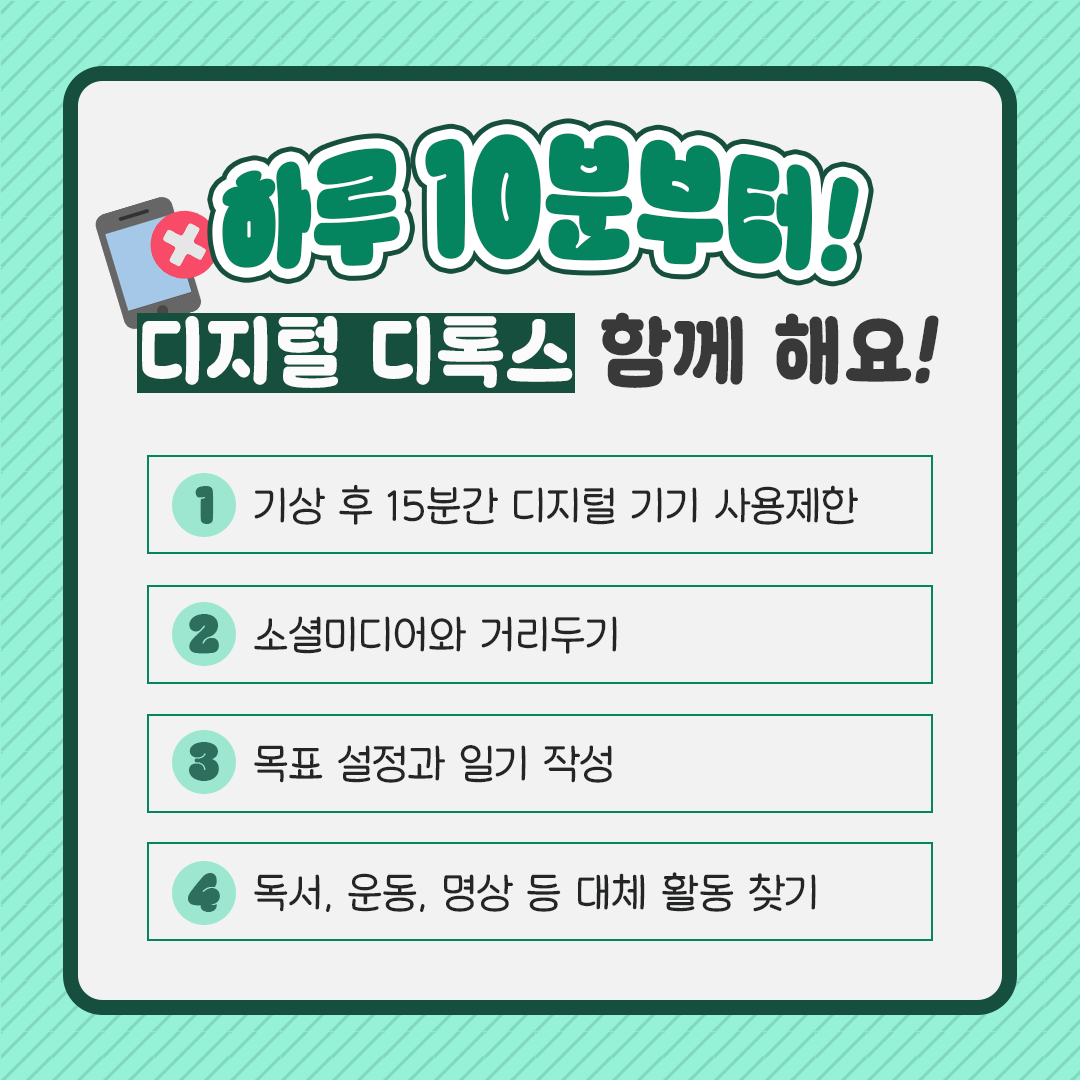
<style>
.page{position:relative;width:1080px;height:1080px;background:#f2f2f2}
.page>*{position:absolute;margin:0}
.t1{font:100px "LOTTERIACHAB";color:#05855f;scale:0.96 1}
.t2{font:100px "LOTTERIACHAB";color:#05855f;font-style:italic;scale:0.96 1}
.t3{font:45px "LOTTERIACHAB";color:#2d6f5c;scale:0.96 1}
.t4{font:45px "HakgyoansimDunggeunmisoTTF-R";color:#242525;scale:0.96 1}
</style>
<div class="page">
<p class="t1" style="left:222px;top:133px;width:637px;height:139px">하루 10분부터<span class="t2">!</span></p>
<p class="t3" style="left:195px;top:486px;width:19px;height:38px">1</p>
<p class="t4" style="left:254px;top:484px;width:604px;height:41px">기상 후 15분간 디지털 기기 사용제한</p>
<p class="t3" style="left:189px;top:614px;width:30px;height:40px">2</p>
<p class="t4" style="left:254px;top:616px;width:363px;height:38px">소셜미디어와 거리두기</p>
<p class="t3" style="left:189px;top:742px;width:30px;height:39px">3</p>
<p class="t4" style="left:254px;top:745px;width:358px;height:38px">목표 설정과 일기 작성</p>
<p class="t3" style="left:188px;top:873px;width:32px;height:39px">4</p>
<p class="t4" style="left:254px;top:872px;width:562px;height:40px">독서, 운동, 명상 등 대체 활동 찾기</p>
</div>
